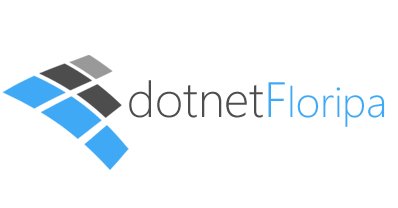
<style>
.page{position:relative;width:398px;height:208px;background:#ffffff}
.page>*{position:absolute;margin:0}
.t1{font:49.6px "SegoeUI-Light";color:#4d4d4d}
.t2{font:49.6px "SegoeUI-Light";color:#3fa9f5}
.t3{font:42.3px "SegoeUI-Light";color:#3fa9f5}
</style>
<div class="page">
<p class="t1" style="left:129px;top:80px;width:256px;height:47px">dotnet<span class="t2">F</span><span class="t3">loripa</span></p>
</div>
